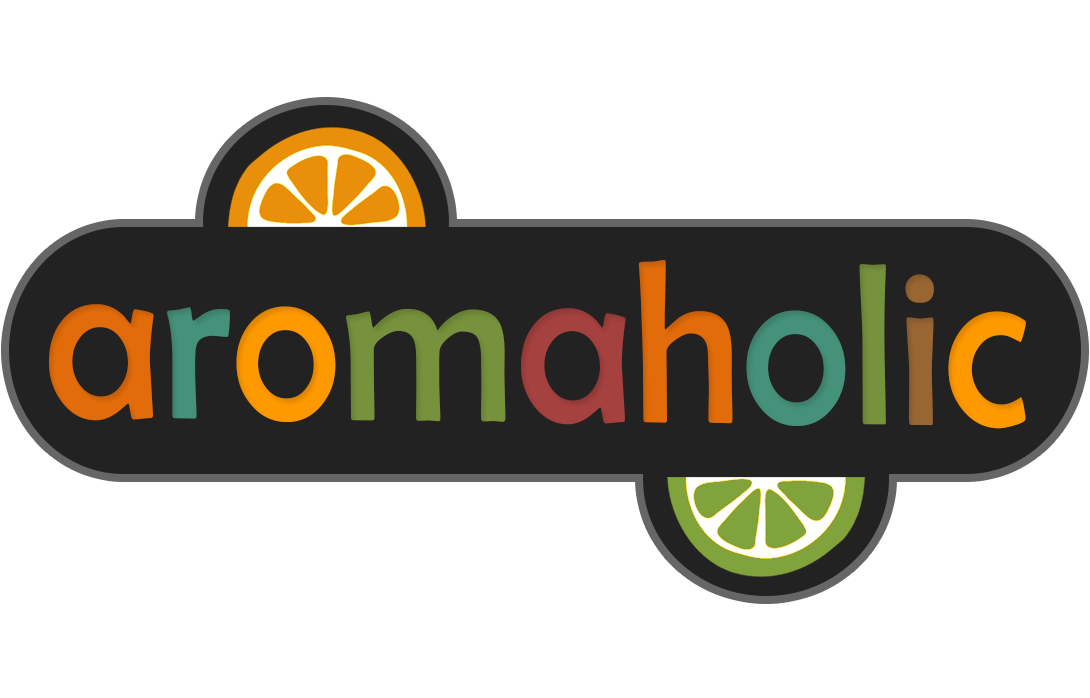
<style>
.page{position:relative;width:1090px;height:698px;background:#ffffff}
.page>*{position:absolute;margin:0}
.t1{font:233.4px "BerlinSansFB-Reg";letter-spacing:0.005em;color:#e36c0a;scale:0.89 1}
.t2{font:233.4px "BerlinSansFB-Reg";letter-spacing:0.005em;color:#459179;scale:0.89 1}
.t3{font:233.4px "BerlinSansFB-Reg";letter-spacing:0.005em;color:#ff9900;scale:0.89 1}
.t4{font:233.4px "BerlinSansFB-Reg";letter-spacing:0.005em;color:#76923c;scale:0.89 1}
.t5{font:233.4px "BerlinSansFB-Reg";letter-spacing:0.005em;color:#a5413f;scale:0.89 1}
.t6{font:233.4px "BerlinSansFB-Reg";letter-spacing:0.005em;color:#996633;scale:0.89 1}
</style>
<div class="page">
<p class="t1" style="left:49px;top:260px;width:977px;height:169px;rotate:1deg">a<span class="t2">r</span><span class="t3">o</span><span class="t4">m</span><span class="t5">a</span>h<span class="t2">o</span><span class="t4">l</span><span class="t6">i</span><span class="t3">c</span></p>
</div>
